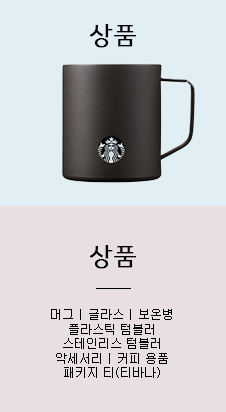
<style>
.page{position:relative;width:226px;height:412px;background:#e8e0e0}
.page>*{position:absolute;margin:0}
.t1{font:24px "HCRDotum";color:#000000;font-weight:bold}
.t2{font:12px "New-Gulim";color:#000000}
.t3{font:12px/120px "New-Gulim";color:#000000}
</style>
<div class="page">
<p class="t1" style="left:90px;top:24px;width:46px;height:24px">상품</p>
<p class="t1" style="left:90px;top:245px;width:46px;height:24px">상품</p>
<p class="t2" style="left:51px;top:309px;width:121px;height:69px;text-align:center"><span class="t3">머그 | 글라스 | 보온병<br></span>플라스틱 텀블러<br>스테인리스 텀블러<br>악세서리 | 커피 용품<br>패키지 티(티바나)</p>
</div>
